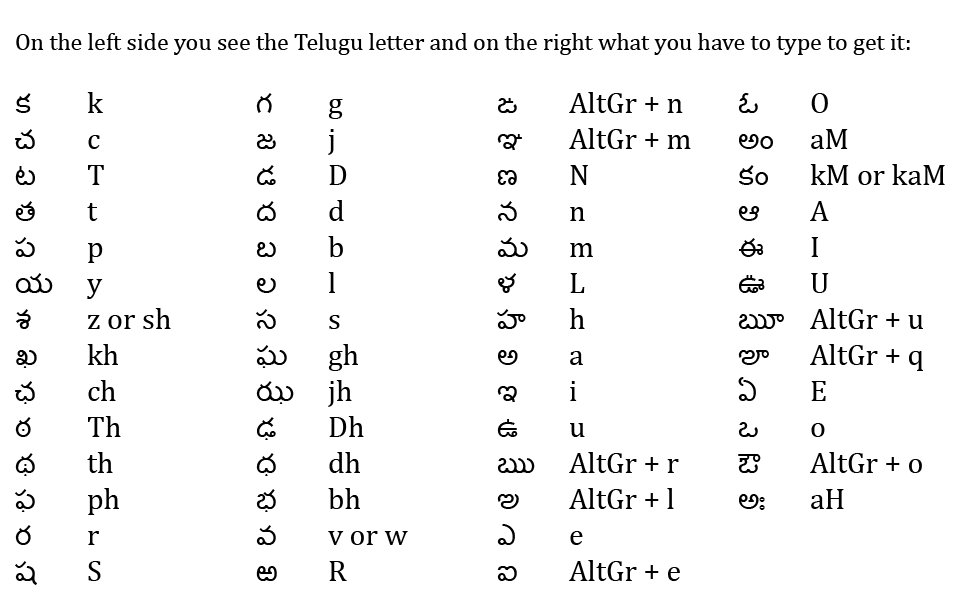
<style>
.page{position:relative;width:960px;height:600px;background:#ffffff}
.page>*{position:absolute;margin:0}
.t1{font:24px "Cambria";color:#000000}
.t2{font:30px "Cambria";color:#000000}
.t3{font:30px "Gautami";color:#000000}
</style>
<div class="page">
<p class="t1" style="left:16px;top:33px;width:894px;height:22px">On the left side you see the Telugu letter and on the right what you have to type to get it:</p>
<p class="t2" style="left:15px;top:92px;width:156px;height:493px"><span class="t3">క</span>  k<br><span class="t3">చ</span>  c<br><span class="t3">ట</span>  T<br><span class="t3">త</span>  t<br><span class="t3">ప</span>  p<br><span class="t3">య</span> y<br><span class="t3">శ</span>  z or sh<br><span class="t3">ఖ</span>  kh<br><span class="t3">ఛ</span>  ch<br><span class="t3">ఠ</span>  Th<br><span class="t3">థ</span>  th<br><span class="t3">ఫ</span>  ph<br><span class="t3">ర</span>  r<br><span class="t3">ష</span>  S</p>
<p class="t2" style="left:256px;top:93px;width:152px;height:488px"><span class="t3">గ</span>  g<br><span class="t3">జ</span>  j<br><span class="t3">డ</span>  D<br><span class="t3">ద</span>  d<br><span class="t3">బ</span>  b<br><span class="t3">ల</span>  l<br><span class="t3">స</span>  s<br><span class="t3">ఘ</span>  gh<br><span class="t3">ఝ</span> jh<br><span class="t3">ఢ</span>  Dh<br><span class="t3">ధ</span>  dh<br><span class="t3">భ</span>  bh<br><span class="t3">వ</span>  v or w<br><span class="t3">ఱ</span>  R</p>
<p class="t2" style="left:497px;top:92px;width:194px;height:489px"><span class="t3">ఙ</span>  AltGr + n<br><span class="t3">ఞ</span>  AltGr + m<br><span class="t3">ణ</span>  N<br><span class="t3">న</span>  n<br><span class="t3">మ</span>  m<br><span class="t3">ళ</span>  L<br><span class="t3">హ</span>  h<br><span class="t3">అ</span>  a<br><span class="t3">ఇ</span>  i<br><span class="t3">ఉ</span>  u<br><span class="t3">ఋ</span> AltGr + r<br><span class="t3">ఌ</span>  AltGr + l<br><span class="t3">ఎ</span>  e<br><span class="t3">ఐ</span>  AltGr + e</p>
<p class="t2" style="left:738px;top:93px;width:207px;height:417px"><span class="t3">ఓ</span>  O<br><span class="t3">అం</span>  aM<br><span class="t3">కం</span>  kM or kaM<br><span class="t3">ఆ</span>  A<br><span class="t3">ఈ</span>  I<br><span class="t3">ఊ</span>  U<br><span class="t3">ౠ</span> AltGr + u<br><span class="t3">ౡ</span>  AltGr + q<br><span class="t3">ఏ</span>  E<br><span class="t3">ఒ</span>  o<br><span class="t3">ఔ</span>  AltGr + o<br><span class="t3">అః</span>  aH</p>
</div>
